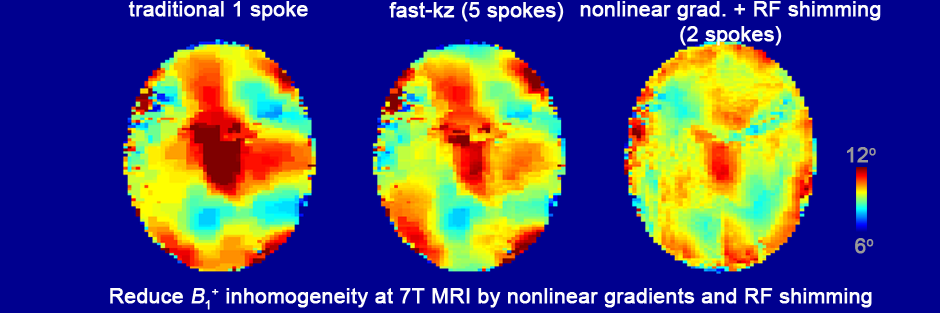
<style>
.page{position:relative;width:940px;height:313px;background:#00008f}
.page>*{position:absolute;margin:0}
.t1{font:20.8px "ArialMT";color:#fcfcfc;font-weight:bold}
.t2{font:20.8px/25px "ArialMT";color:#fcfcfc;font-weight:bold}
.t3{font:20.8px "ArialMT";color:#9a9999;font-weight:bold}
.t4{font:20.8px "ArialMT";color:#fcfcfc;font-weight:bold;font-style:italic}
</style>
<div class="page">
<p class="t1" style="left:128px;top:1px;width:180px;height:20px">traditional 1 spoke</p>
<p class="t1" style="left:389px;top:2px;width:175px;height:20px">fast-kz (5 spokes)</p>
<p class="t2" style="left:580px;top:1px;width:301px;height:45px;text-align:center">nonlinear grad. + RF shimming<br>(2 spokes)</p>
<p class="t3" style="left:847px;top:147px;width:29px;height:16px">12o</p>
<p class="t3" style="left:855px;top:238px;width:19px;height:16px">6o</p>
<p class="t1" style="left:110px;top:288px;width:762px;height:22px">Reduce <span class="t4">B</span>1+ inhomogeneity at 7T MRI by nonlinear gradients and RF shimming</p>
</div>
